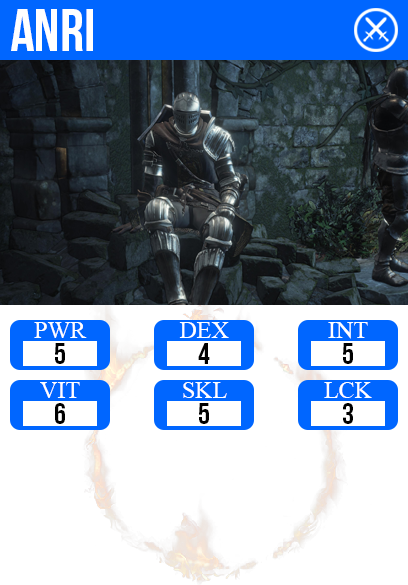
<style>
.page{position:relative;width:408px;height:585px;background:#ffffff}
.page>*{position:absolute;margin:0}
.t1{font:60px "BebasNeue";color:#ffffff}
.t2{font:24px "TimesNewRomanPSMT";color:#ffffff}
.t3{font:30px "BebasNeue";color:#000000}
</style>
<div class="page">
<p class="t1" style="left:11px;top:9px;width:82px;height:42px">anri</p>
<p class="t2" style="left:34px;top:322px;width:53px;height:16px">PWR</p>
<p class="t2" style="left:179px;top:322px;width:50px;height:16px">DEX</p>
<p class="t2" style="left:328px;top:322px;width:40px;height:17px">INT</p>
<p class="t3" style="left:55px;top:343px;width:10px;height:21px">5</p>
<p class="t3" style="left:198px;top:343px;width:12px;height:21px">4</p>
<p class="t3" style="left:343px;top:343px;width:10px;height:21px">5</p>
<p class="t2" style="left:40px;top:382px;width:40px;height:16px">VIT</p>
<p class="t2" style="left:183px;top:382px;width:44px;height:16px">SKL</p>
<p class="t2" style="left:324px;top:382px;width:48px;height:16px">LCK</p>
<p class="t3" style="left:55px;top:403px;width:10px;height:21px">6</p>
<p class="t3" style="left:199px;top:403px;width:10px;height:21px">5</p>
<p class="t3" style="left:343px;top:403px;width:10px;height:21px">3</p>
</div>
